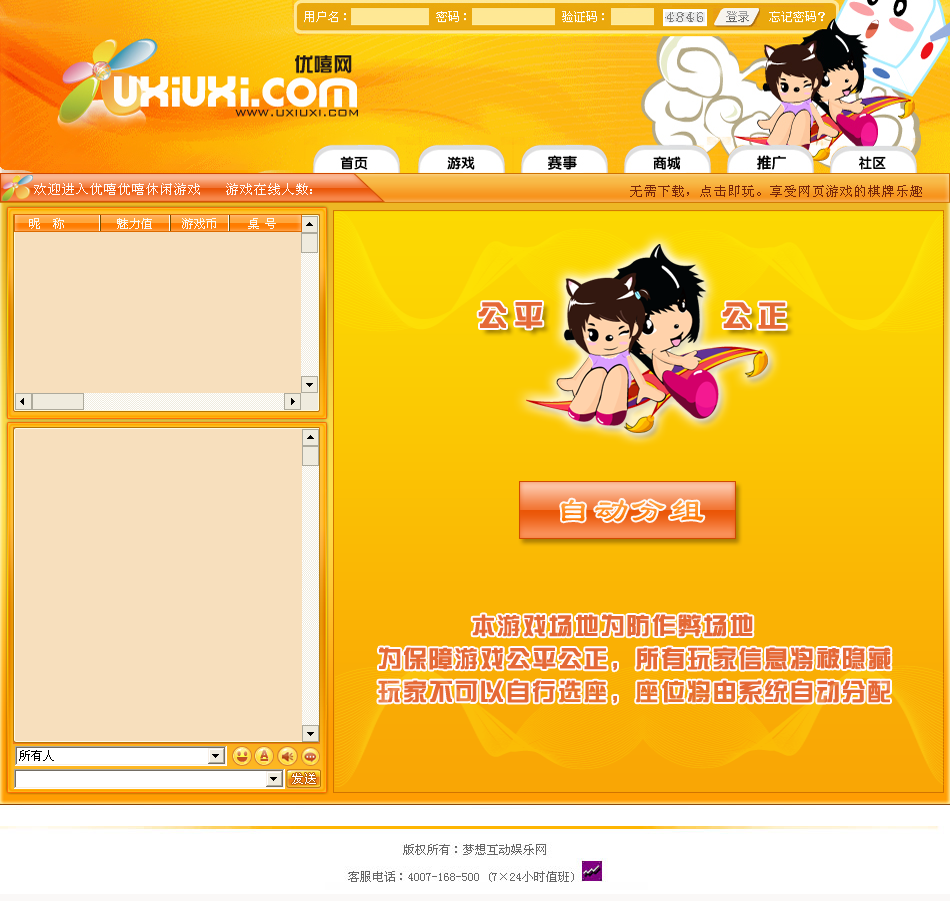
<style>
.page{position:relative;width:950px;height:901px}
.page>*{position:absolute;margin:0}
.t1{font:13px "SimSun";letter-spacing:0.075em;color:#faf9f8}
.t2{font:13px "SimSun";letter-spacing:0.075em;color:#76250a}
.t3{font:12px "SimSun";letter-spacing:-0.01em;color:#faf9f8}
.t4{font:35px "LiSu";letter-spacing:0.075em}
.t5{font:24px/33px "FZZYJW--GB1-0";letter-spacing:0.075em;color:#e56936}
.t6{font:24px/30px "¾­µäÆ½ºÚ¼ò Regular";letter-spacing:-0.01em;color:#e56936}
</style>
<div class="page">
<p class="t1" style="left:34px;top:183px;width:278px;height:12px">欢迎进入优嘻优嘻休闲游戏   游戏在线人数：</p>
<p class="t2" style="left:630px;top:185px;width:292px;height:12px">无需下载，点击即玩。享受网页游戏的棋牌乐趣</p>
<p class="t3" style="left:29px;top:218px;width:247px;height:11px">昵  称         魅力值     游戏币     桌 号</p>
<p class="t4" style="left:561px;top:499px;width:143px;height:23px">自动分组</p>
<p class="t5" style="left:378px;top:614px;width:513px;height:90px"><span class="t6">        </span>本游戏场地为防作弊场地<br>为保障游戏公平公正，所有玩家信息将被隐藏<br>玩家不可以自行选座，座位将由系统自动分配</p>
</div>
